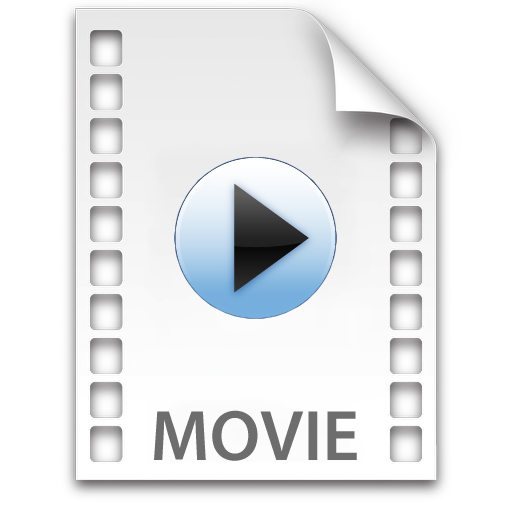
<style>
.page{position:relative;width:512px;height:512px;background:#ffffff}
.page>*{position:absolute;margin:0}
.t1{font:72px "MyriadPro-Semibold";color:#6e6d6d}
</style>
<div class="page">
<p class="t1" style="left:154px;top:410px;width:203px;height:51px">MOVIE</p>
</div>
